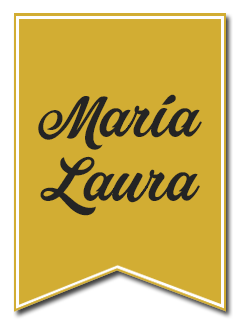
<style>
.page{position:relative;width:242px;height:330px;background:#d2ad33}
.page>*{position:absolute;margin:0}
.t1{font:60px "PainterPERSONALUSEONLY";color:#242424}
</style>
<div class="page">
<p class="t1" style="left:38px;top:94px;width:164px;height:56px">María</p>
<p class="t1" style="left:40px;top:156px;width:160px;height:60px">Laura</p>
</div>
